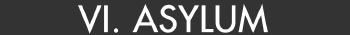
<style>
.page{position:relative;width:350px;height:35px;background:#333333}
.page>*{position:absolute;margin:0}
.t1{font:35px "Futura";color:#ffffff;font-weight:bold}
</style>
<div class="page">
<p class="t1" style="left:78px;top:4px;width:190px;height:30px">VI. ASYLUM</p>
</div>
